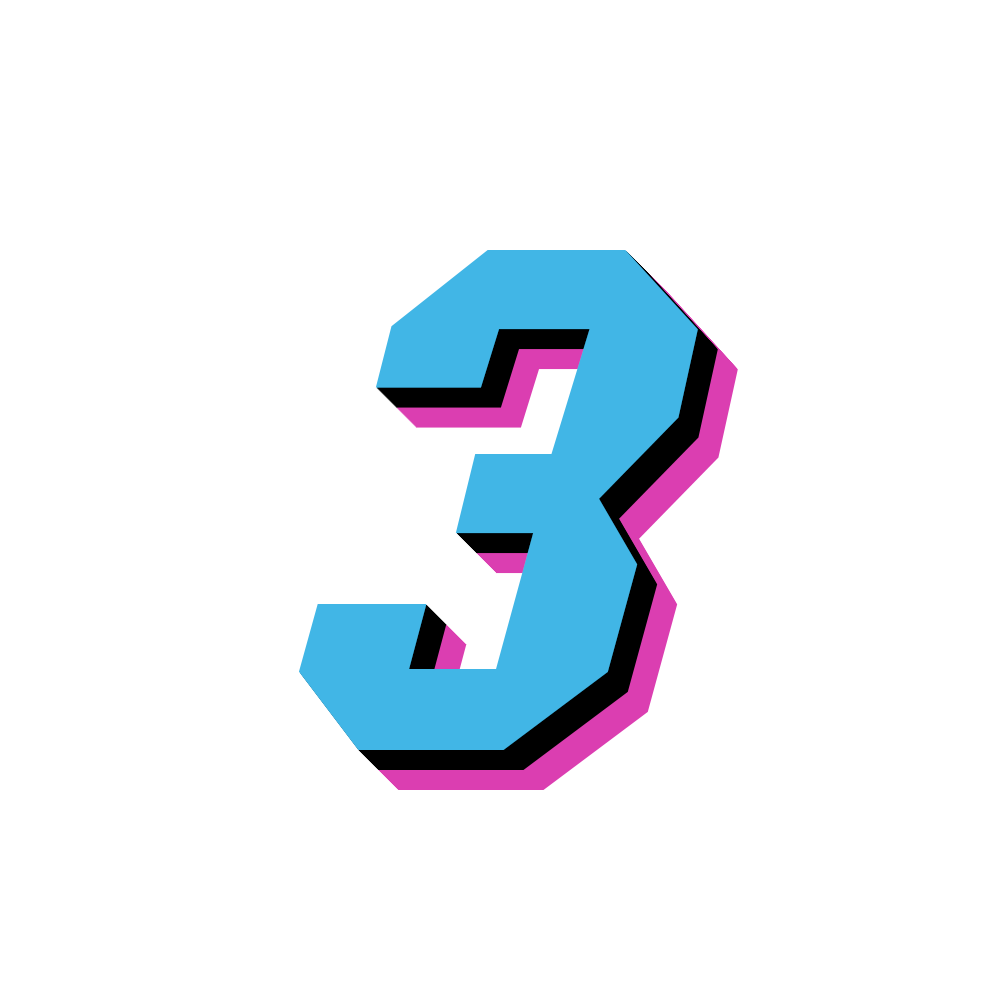
<style>
.page{position:relative;width:1000px;height:1000px;background:#ffffff}
.page>*{position:absolute;margin:0}
.t1{font:625px "NBAHeat";color:#41b6e6}
</style>
<div class="page">
<p class="t1" style="left:299px;top:250px;width:399px;height:500px">3</p>
</div>
